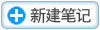
<style>
.page{position:relative;width:100px;height:30px;background:#ffffff}
.page>*{position:absolute;margin:0}
.t1{font:16px "SimHei";letter-spacing:-0.05em;color:#3f3e3e}
</style>
<div class="page">
<p class="t1" style="left:30px;top:7px;width:61px;height:16px">新建笔记</p>
</div>
